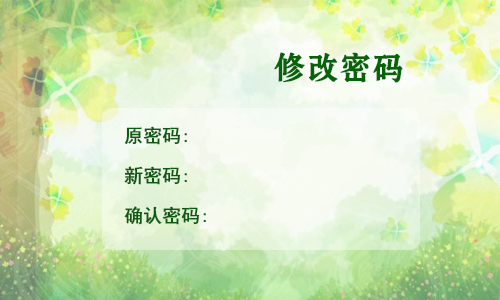
<style>
.page{position:relative;width:500px;height:300px}
.page>*{position:absolute;margin:0}
.t1{font:32px "-G-h-s-n-0-0-m";color:#066408;font-weight:bold}
.t2{font:18.7px/40px "SimHei";color:#0d5b12;font-weight:bold}
</style>
<div class="page">
<p class="t1" style="left:274px;top:52px;width:129px;height:31px">修改密码</p>
<p class="t2" style="left:124px;top:126px;width:82px;height:99px">原密码:<br>新密码:<br>确认密码:</p>
</div>
